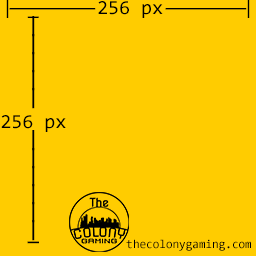
<style>
.page{position:relative;width:256px;height:256px;background:#ffcc00}
.page>*{position:absolute;margin:0}
.t1{font:20px "Consolas";letter-spacing:-0.3em;color:#000000}
.t2{font:20px "Consolas";color:#000000}
.t3{font:20px/18px "Consolas";color:#000000;font-weight:bold}
.t4{font:20px/3px "Consolas";color:#000000;font-weight:bold}
.t5{font:12px "Consolas";color:#000000}
</style>
<div class="page">
<p class="t1" style="left:6px;top:0px;width:244px;height:18px">|----------------- <span class="t2">256 px</span>----------------|</p>
<p class="t3" style="left:1px;top:16px;width:65px;height:228px;text-align:center"><span class="t2">_<br></span>|<br>|<br>|<br>|<br>|<br><span class="t2">256 px<br></span>|<br>|<br>|<br>|<br>|<br>|<br><span class="t4">_</span></p>
<p class="t5" style="left:126px;top:239px;width:125px;height:12px">thecolonygaming.com</p>
</div>
